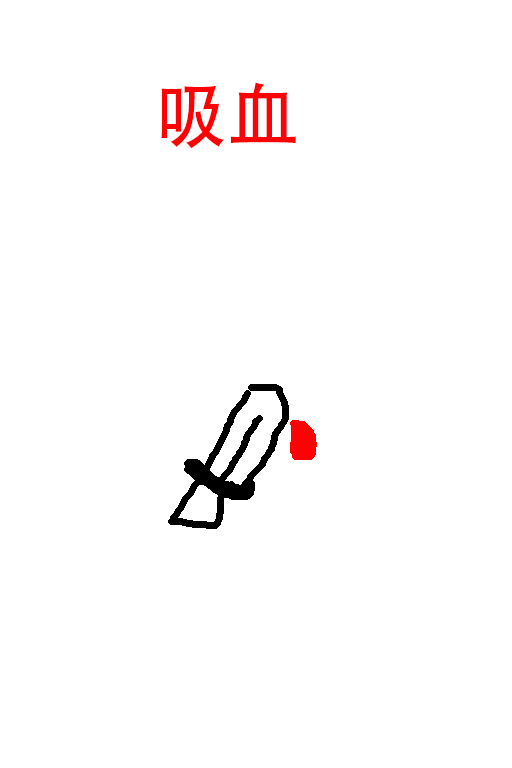
<style>
.page{position:relative;width:512px;height:768px;background:#ffffff}
.page>*{position:absolute;margin:0}
.t1{font:72px "AdobeHeitiStd-Regular";color:#ff0004}
</style>
<div class="page">
<p class="t1" style="left:161px;top:82px;width:135px;height:67px">吸血</p>
</div>
